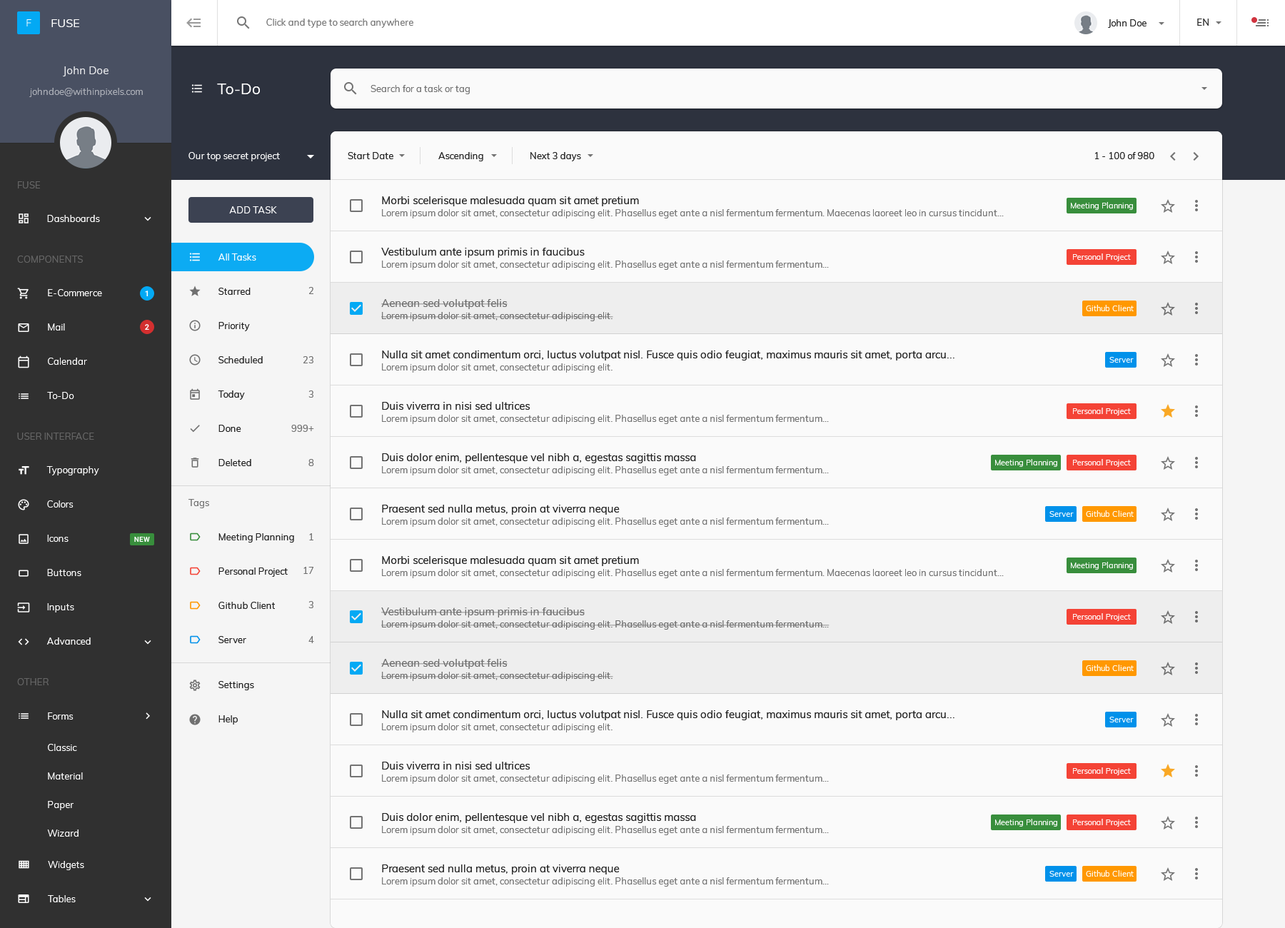
<style>
.page{position:relative;width:1285px;height:928px;background:#fafafa}
.page>*{position:absolute;margin:0}
.t1{font:15px "Muli-Regular";color:#ffffff}
.t2{font:9.3px "Muli-Regular";color:#737373}
.t3{font:9.3px "Muli-Regular";color:#ffffff}
.t4{font:9.3px "Muli-Regular";color:#202020}
.t5{font:10.7px "Muli-Regular";color:#202020}
.t6{font:7.9px "Muli-Regular";color:#ffffff}
.t7{font:9.3px/34.3px "Muli-Regular";color:#202020}
.t8{font:9.3px "Muli-Regular";color:#707070}
.t9{font:10.7px "Muli-Regular";color:#6d6d6d}
.t10{font:9.3px "Muli-Regular";color:#6d6d6d}
</style>
<div class="page">
<p class="t1" style="left:217px;top:84px;width:43px;height:10px">To-Do</p>
<p class="t2" style="left:370px;top:85px;width:100px;height:9px">Search for a task or tag</p>
<p class="t3" style="left:188px;top:152px;width:92px;height:9px">Our top secret project</p>
<p class="t4" style="left:348px;top:152px;width:45px;height:7px">Start Date</p>
<p class="t4" style="left:438px;top:152px;width:45px;height:9px">Ascending</p>
<p class="t4" style="left:530px;top:152px;width:51px;height:9px">Next 3 days</p>
<p class="t4" style="left:1095px;top:152px;width:59px;height:7px">1 - 100 of 980</p>
<p class="t5" style="left:382px;top:196px;width:257px;height:10px">Morbi scelerisque malesuada quam sit amet pretium</p>
<p class="t3" style="left:229px;top:206px;width:48px;height:7px">ADD TASK</p>
<p class="t2" style="left:382px;top:209px;width:622px;height:9px">Lorem ipsum dolor sit amet, consectetur adipiscing elit. Phasellus eget ante a nisl fermentum fermentum. Maecenas laoreet leo in cursus tincidunt...</p>
<p class="t6" style="left:1071px;top:202px;width:62px;height:8px">Meeting Planning</p>
<p class="t3" style="left:218px;top:253px;width:38px;height:8px">All Tasks</p>
<p class="t5" style="left:381px;top:248px;width:204px;height:10px">Vestibulum ante ipsum primis in faucibus</p>
<p class="t6" style="left:1073px;top:253px;width:58px;height:8px">Personal Project</p>
<p class="t2" style="left:382px;top:261px;width:447px;height:9px">Lorem ipsum dolor sit amet, consectetur adipiscing elit. Phasellus eget ante a nisl fermentum fermentum...</p>
<p class="t7" style="left:218px;top:288px;width:45px;height:178px">Starred<br>Priority<br>Scheduled<br>Today<br>Done<br>Deleted</p>
<p class="t8" style="left:308px;top:287px;width:5px;height:7px">2</p>
<p class="t9" style="left:381px;top:299px;width:127px;height:10px">Aenean sed volutpat felis</p>
<p class="t6" style="left:1086px;top:305px;width:48px;height:6px">Github Client</p>
<p class="t10" style="left:381px;top:312px;width:232px;height:9px">Lorem ipsum dolor sit amet, consectetur adipiscing elit.</p>
<p class="t5" style="left:382px;top:351px;width:572px;height:9px">Nulla sit amet condimentum orci, luctus volutpat nisl. Fusce quis odio feugiat, maximus mauris sit amet, porta arcu...</p>
<p class="t8" style="left:303px;top:356px;width:10px;height:7px">23</p>
<p class="t2" style="left:382px;top:363px;width:230px;height:10px">Lorem ipsum dolor sit amet, consectetur adipiscing elit.</p>
<p class="t6" style="left:1109px;top:357px;width:25px;height:6px">Server</p>
<p class="t8" style="left:308px;top:390px;width:5px;height:8px">3</p>
<p class="t5" style="left:382px;top:402px;width:148px;height:8px">Duis viverra in nisi sed ultrices</p>
<p class="t6" style="left:1073px;top:408px;width:58px;height:7px">Personal Project</p>
<p class="t8" style="left:291px;top:425px;width:23px;height:7px">999+</p>
<p class="t2" style="left:382px;top:415px;width:447px;height:9px">Lorem ipsum dolor sit amet, consectetur adipiscing elit. Phasellus eget ante a nisl fermentum fermentum...</p>
<p class="t8" style="left:308px;top:459px;width:6px;height:7px">8</p>
<p class="t5" style="left:382px;top:453px;width:314px;height:10px">Duis dolor enim, pellentesque vel nibh a, egestas sagittis massa</p>
<p class="t6" style="left:995px;top:459px;width:62px;height:8px">Meeting Planning</p>
<p class="t6" style="left:1073px;top:459px;width:58px;height:8px">Personal Project</p>
<p class="t2" style="left:382px;top:466px;width:447px;height:9px">Lorem ipsum dolor sit amet, consectetur adipiscing elit. Phasellus eget ante a nisl fermentum fermentum...</p>
<p class="t8" style="left:188px;top:499px;width:21px;height:9px">Tags</p>
<p class="t5" style="left:382px;top:505px;width:238px;height:10px">Praesent sed nulla metus, proin at viverra neque</p>
<p class="t2" style="left:382px;top:518px;width:447px;height:9px">Lorem ipsum dolor sit amet, consectetur adipiscing elit. Phasellus eget ante a nisl fermentum fermentum...</p>
<p class="t6" style="left:1049px;top:511px;width:25px;height:6px">Server</p>
<p class="t6" style="left:1086px;top:510px;width:48px;height:7px">Github Client</p>
<p class="t7" style="left:218px;top:533px;width:76px;height:110px">Meeting Planning<br>Personal Project<br>Github Client<br>Server</p>
<p class="t8" style="left:309px;top:533px;width:4px;height:7px">1</p>
<p class="t5" style="left:382px;top:556px;width:257px;height:10px">Morbi scelerisque malesuada quam sit amet pretium</p>
<p class="t8" style="left:303px;top:567px;width:10px;height:7px">17</p>
<p class="t2" style="left:382px;top:569px;width:622px;height:9px">Lorem ipsum dolor sit amet, consectetur adipiscing elit. Phasellus eget ante a nisl fermentum fermentum. Maecenas laoreet leo in cursus tincidunt...</p>
<p class="t6" style="left:1071px;top:562px;width:62px;height:8px">Meeting Planning</p>
<p class="t8" style="left:308px;top:601px;width:5px;height:7px">3</p>
<p class="t9" style="left:381px;top:607px;width:204px;height:10px">Vestibulum ante ipsum primis in faucibus</p>
<p class="t6" style="left:1073px;top:613px;width:58px;height:8px">Personal Project</p>
<p class="t10" style="left:381px;top:620px;width:448px;height:10px">Lorem ipsum dolor sit amet, consectetur adipiscing elit. Phasellus eget ante a nisl fermentum fermentum...</p>
<p class="t8" style="left:308px;top:636px;width:6px;height:7px">4</p>
<p class="t9" style="left:381px;top:659px;width:127px;height:10px">Aenean sed volutpat felis</p>
<p class="t6" style="left:1086px;top:665px;width:48px;height:6px">Github Client</p>
<p class="t10" style="left:381px;top:672px;width:232px;height:9px">Lorem ipsum dolor sit amet, consectetur adipiscing elit.</p>
<p class="t7" style="left:218px;top:681px;width:36px;height:44px">Settings<br>Help</p>
<p class="t5" style="left:382px;top:710px;width:572px;height:10px">Nulla sit amet condimentum orci, luctus volutpat nisl. Fusce quis odio feugiat, maximus mauris sit amet, porta arcu...</p>
<p class="t2" style="left:382px;top:723px;width:230px;height:9px">Lorem ipsum dolor sit amet, consectetur adipiscing elit.</p>
<p class="t6" style="left:1109px;top:717px;width:25px;height:5px">Server</p>
<p class="t5" style="left:382px;top:762px;width:148px;height:8px">Duis viverra in nisi sed ultrices</p>
<p class="t6" style="left:1073px;top:767px;width:58px;height:8px">Personal Project</p>
<p class="t2" style="left:382px;top:775px;width:447px;height:9px">Lorem ipsum dolor sit amet, consectetur adipiscing elit. Phasellus eget ante a nisl fermentum fermentum...</p>
<p class="t5" style="left:382px;top:813px;width:314px;height:10px">Duis dolor enim, pellentesque vel nibh a, egestas sagittis massa</p>
<p class="t6" style="left:995px;top:819px;width:62px;height:8px">Meeting Planning</p>
<p class="t6" style="left:1073px;top:819px;width:58px;height:8px">Personal Project</p>
<p class="t2" style="left:382px;top:826px;width:447px;height:9px">Lorem ipsum dolor sit amet, consectetur adipiscing elit. Phasellus eget ante a nisl fermentum fermentum...</p>
<p class="t5" style="left:382px;top:864px;width:238px;height:10px">Praesent sed nulla metus, proin at viverra neque</p>
<p class="t2" style="left:382px;top:877px;width:447px;height:10px">Lorem ipsum dolor sit amet, consectetur adipiscing elit. Phasellus eget ante a nisl fermentum fermentum...</p>
<p class="t6" style="left:1049px;top:871px;width:25px;height:6px">Server</p>
<p class="t6" style="left:1086px;top:870px;width:48px;height:7px">Github Client</p>
</div>
